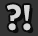
<style>
.page{position:relative;width:38px;height:36px;background:#333333}
.page>*{position:absolute;margin:0}
.t1{font:35px "MikadoMedium";color:#d7d7d7}
</style>
<div class="page">
<p class="t1" style="left:7px;top:4px;width:24px;height:27px">?!</p>
</div>
